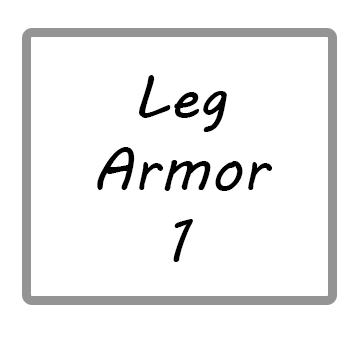
<style>
.page{position:relative;width:360px;height:360px;background:#ffffff}
.page>*{position:absolute;margin:0}
.t1{font:60px "MVBoli";color:#000000}
.t2{font:23.3px "MVBoli";color:#000000}
</style>
<div class="page">
<p class="t1" style="left:97px;top:75px;width:176px;height:187px;text-align:center"><span class="t2"><br></span>Leg<br>Armor <br>1</p>
</div>
